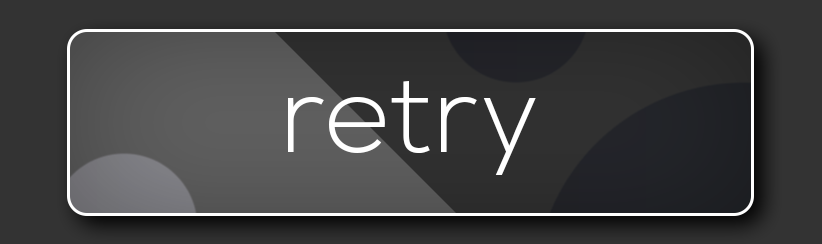
<style>
.page{position:relative;width:822px;height:244px}
.page>*{position:absolute;margin:0}
.t1{font:110.1px "NexaLight";color:#ffffff}
</style>
<div class="page">
<p class="t1" style="left:288px;top:81px;width:248px;height:94px">retry</p>
</div>
